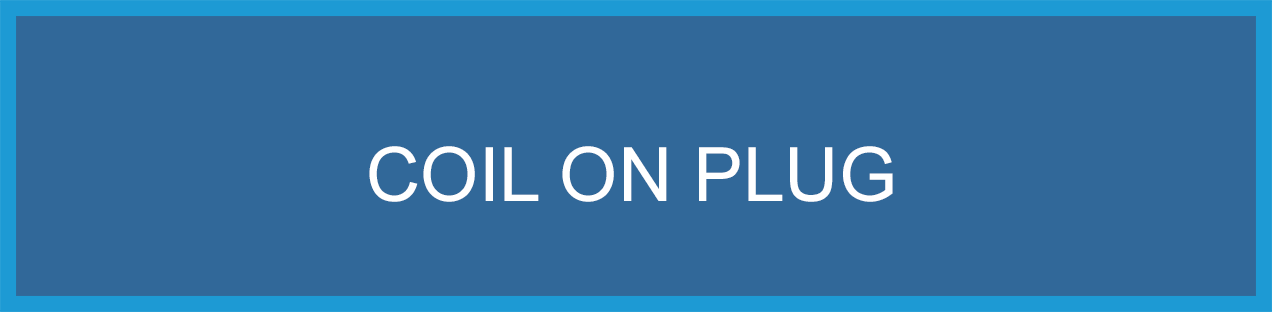
<style>
.page{position:relative;width:1272px;height:312px;background:#316899}
.page>*{position:absolute;margin:0}
.t1{font:75px "ArialMT";color:#ffffff;text-transform:uppercase}
</style>
<div class="page">
<p class="t1" style="left:369px;top:146px;width:524px;height:56px">coil on plug</p>
</div>
